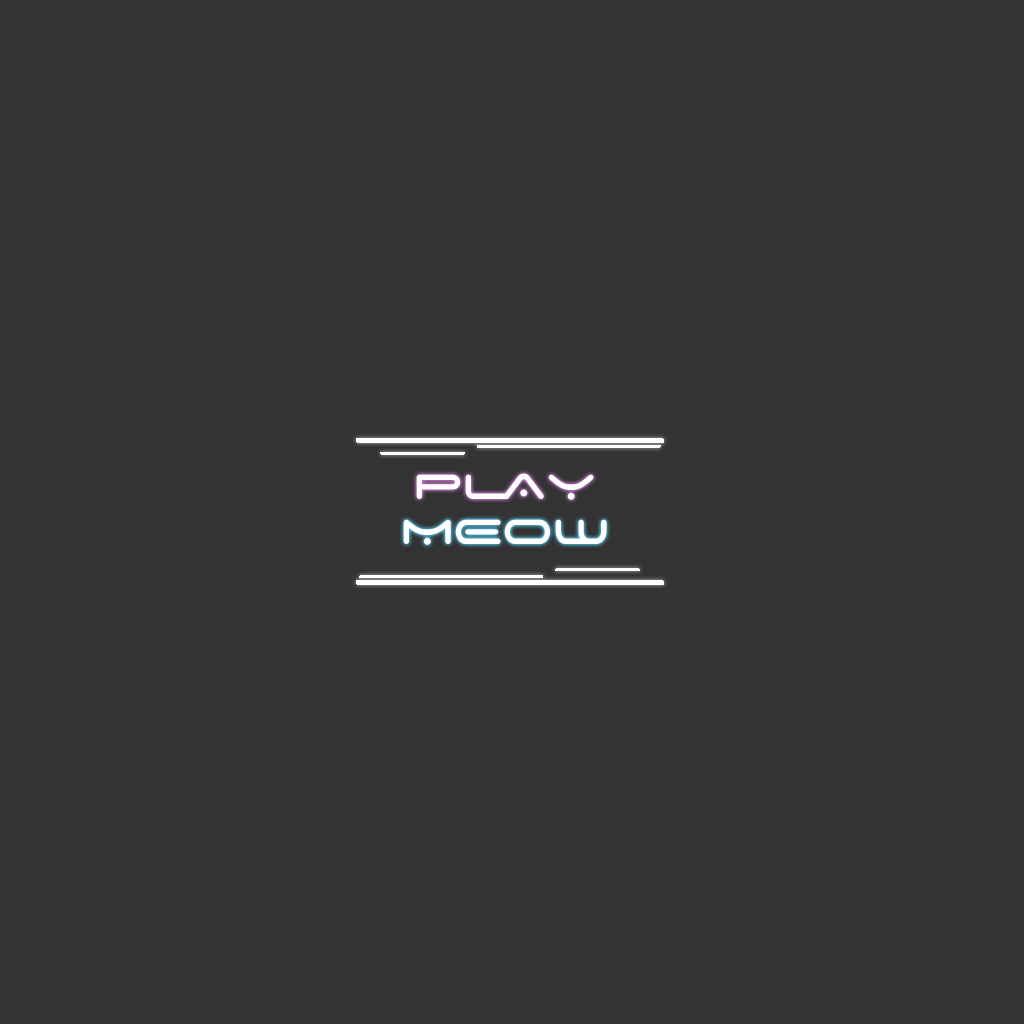
<style>
.page{position:relative;width:1024px;height:1024px;background:#333333}
.page>*{position:absolute;margin:0}
.t1{font:55.6px "SpaceAge";color:#ffffff}
</style>
<div class="page">
<p class="t1" style="left:416px;top:473px;width:178px;height:27px">PLAY</p>
<p class="t1" style="left:403px;top:519px;width:204px;height:26px">MEOW</p>
</div>
